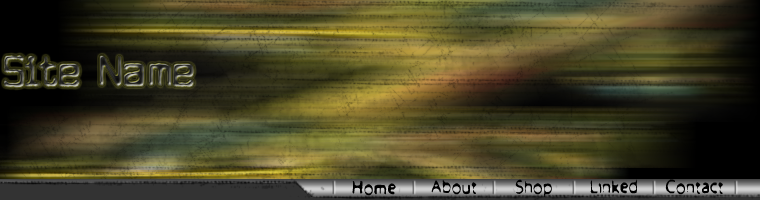
<style>
.page{position:relative;width:760px;height:200px}
.page>*{position:absolute;margin:0}
.t1{font:48px "Cuomotype"}
.t2{font:22px "Froufrou";color:#000000}
</style>
<div class="page">
<p class="t1" style="left:4px;top:55px;width:190px;height:33px">Site Name</p>
<p class="t2" style="left:352px;top:180px;width:44px;height:16px">Home</p>
<p class="t2" style="left:431px;top:179px;width:46px;height:16px">About</p>
<p class="t2" style="left:515px;top:179px;width:37px;height:18px">Shop</p>
<p class="t2" style="left:590px;top:179px;width:47px;height:15px">Linked</p>
<p class="t2" style="left:665px;top:179px;width:58px;height:16px">Contact</p>
</div>
